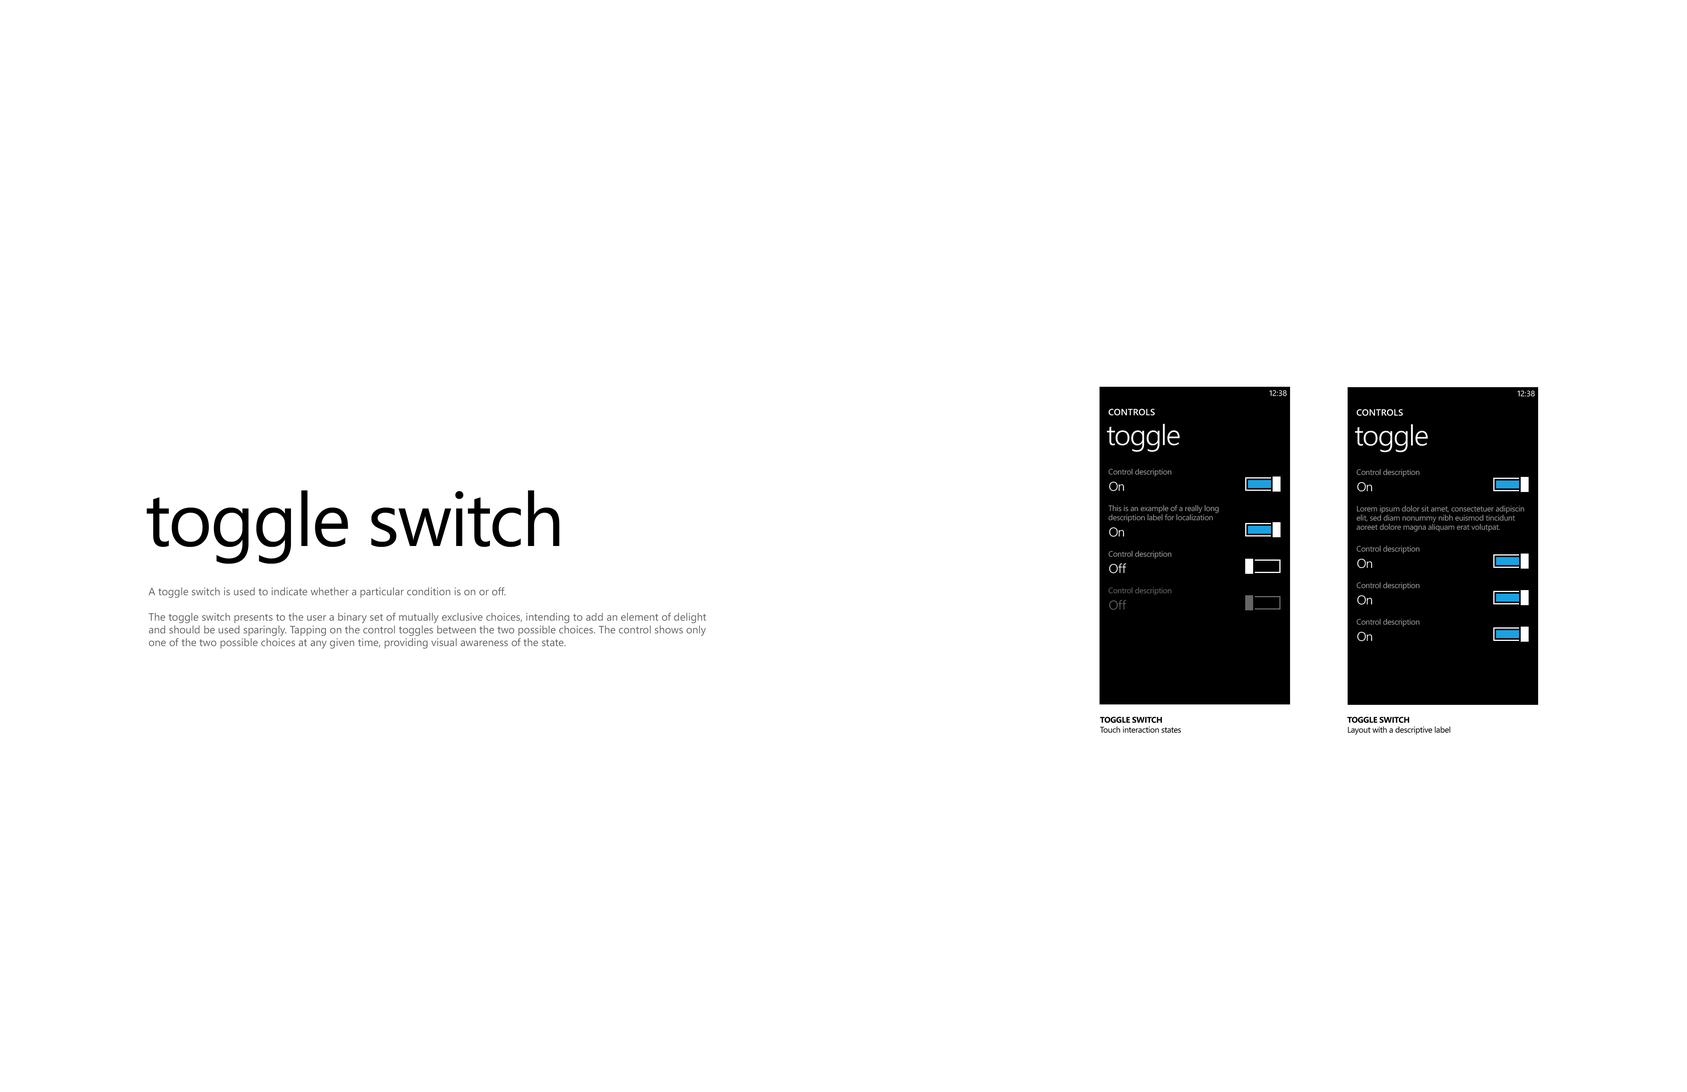
<style>
.page{position:relative;width:1687px;height:1092px;background:#ffffff}
.page>*{position:absolute;margin:0}
.t1{font:7.9px "SegoeWP";color:#ffffff}
.t2{font:9px "SegoeWP-Semibold";letter-spacing:0.025em;color:#ffffff;text-transform:uppercase}
.t3{font:28.6px "SegoeWP-SemiLight";letter-spacing:-0.01em;color:#ffffff}
.t4{font:7.9px "SegoeWP";letter-spacing:-0.025em;color:#999999}
.t5{font:12.7px "SegoeWP-SemiLight";letter-spacing:-0.01em;color:#ffffff}
.t6{font:75.2px "SegoeWP";letter-spacing:-0.025em;color:#000000}
.t7{font:7.9px/9.3px "SegoeWP";letter-spacing:-0.025em;color:#999999}
.t8{font:10.6px "SegoeWP";color:#666666}
.t9{font:7.9px "SegoeWP";letter-spacing:-0.025em;color:#666666}
.t10{font:12.7px "SegoeWP-SemiLight";letter-spacing:-0.01em;color:#666666}
.t11{font:8.3px "SegoeWP";letter-spacing:-0.025em;color:#000000}
.t12{font:8.3px "SegoeWP-Bold";letter-spacing:-0.025em;color:#000000;text-transform:uppercase}
</style>
<div class="page">
<p class="t1" style="left:1270px;top:390px;width:17px;height:6px">12:38</p>
<p class="t1" style="left:1518px;top:390px;width:17px;height:7px">12:38</p>
<p class="t2" style="left:1109px;top:409px;width:46px;height:6px">CONTROLS</p>
<p class="t2" style="left:1357px;top:409px;width:46px;height:7px">CONTROLS</p>
<p class="t3" style="left:1107px;top:424px;width:73px;height:28px">toggle</p>
<p class="t3" style="left:1355px;top:424px;width:73px;height:28px">toggle</p>
<p class="t4" style="left:1109px;top:469px;width:63px;height:7px">Control description</p>
<p class="t4" style="left:1357px;top:469px;width:63px;height:8px">Control description</p>
<p class="t5" style="left:1109px;top:482px;width:15px;height:9px">On</p>
<p class="t5" style="left:1358px;top:482px;width:15px;height:10px">On</p>
<p class="t6" style="left:147px;top:490px;width:412px;height:74px">toggle switch</p>
<p class="t7" style="left:1109px;top:505px;width:110px;height:17px">This is an example of a really long<br>description label for localization</p>
<p class="t7" style="left:1357px;top:505px;width:168px;height:27px">Lorem ipsum dolor sit amet, consectetuer adipiscin<br>elit, sed diam nonummy nibh euismod tincidunt<br>aoreet dolore magna aliquam erat volutpat.</p>
<p class="t5" style="left:1109px;top:527px;width:15px;height:10px">On</p>
<p class="t4" style="left:1357px;top:546px;width:63px;height:7px">Control description</p>
<p class="t4" style="left:1109px;top:551px;width:63px;height:8px">Control description</p>
<p class="t5" style="left:1109px;top:563px;width:18px;height:10px">Off</p>
<p class="t5" style="left:1358px;top:559px;width:15px;height:9px">On</p>
<p class="t8" style="left:148px;top:587px;width:558px;height:62px">A toggle switch is used to indicate whether a particular condition is on or off.<br><br>The toggle switch presents to the user a binary set of mutually exclusive choices, intending to add an element of delight and should be used sparingly. Tapping on the control toggles between the two possible choices. The control shows only one of the two possible choices at any given time, providing visual awareness of the state.</p>
<p class="t9" style="left:1109px;top:587px;width:63px;height:8px">Control description</p>
<p class="t4" style="left:1357px;top:582px;width:63px;height:8px">Control description</p>
<p class="t10" style="left:1109px;top:600px;width:18px;height:10px">Off</p>
<p class="t5" style="left:1358px;top:595px;width:15px;height:10px">On</p>
<p class="t4" style="left:1357px;top:619px;width:63px;height:8px">Control description</p>
<p class="t5" style="left:1358px;top:632px;width:15px;height:9px">On</p>
<p class="t11" style="left:1100px;top:717px;width:81px;height:16px"><span class="t12">toggle switch<br></span>Touch interaction states</p>
<p class="t11" style="left:1348px;top:717px;width:103px;height:18px"><span class="t12">toggle switch<br></span>Layout with a descriptive label</p>
</div>
